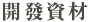
<style>
.page{position:relative;width:90px;height:22px;background:#ffffff}
.page>*{position:absolute;margin:0}
.t1{font:20px "RyuminPr6N-ExBold";letter-spacing:0.1em;color:#4c4843}
</style>
<div class="page">
<p class="t1" style="left:2px;top:1px;width:86px;height:20px">開發資材</p>
</div>
